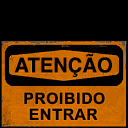
<style>
.page{position:relative;width:128px;height:128px;background:#000000}
.page>*{position:absolute;margin:0}
.t1{font:20.3px "Helvetica-Bold";color:#000000;text-transform:uppercase}
.t2{font:16px "MHeiPRC-Xbold";color:#000000}
</style>
<div class="page">
<p class="t1" style="left:14px;top:53px;width:98px;height:24px">atenção</p>
<p class="t2" style="left:24px;top:92px;width:81px;height:13px">PROIBIDO</p>
<p class="t2" style="left:29px;top:108px;width:69px;height:12px">ENTRAR</p>
</div>
